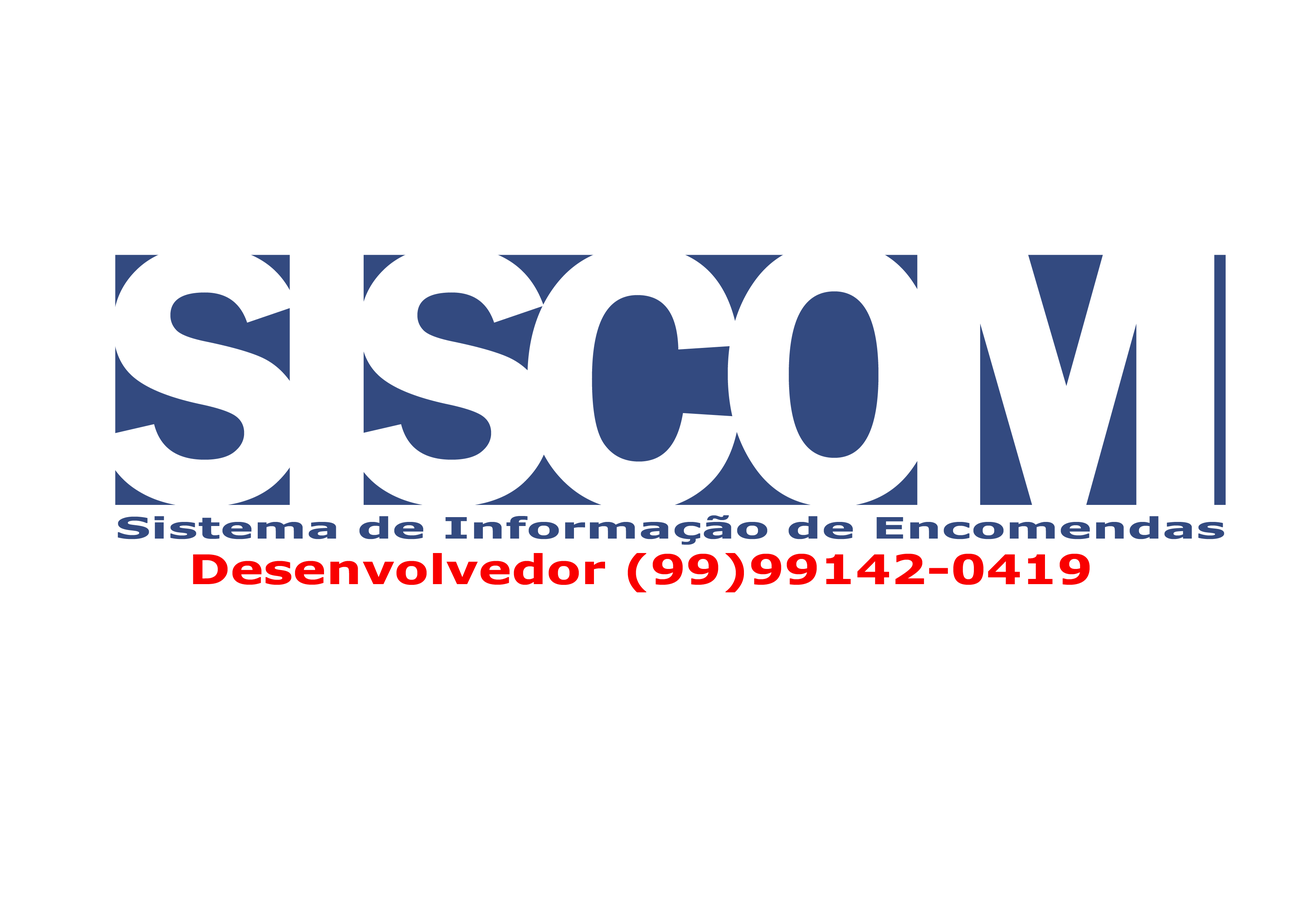
<style>
.page{position:relative;width:1299px;height:918px;background:#ffffff}
.page>*{position:absolute;margin:0}
.t1{font:379.6px "FranklinGothic-Demi";color:#ffffff}
.t2{font:385.4px "FranklinGothic-Demi";color:#ffffff;scale:0.97 1}
.t3{font:379.6px "Bauhaus93";color:#ffffff}
.t4{font:384.5px "FranklinGothic-Heavy";color:#ffffff;scale:1.07 1}
.t5{font:29.5px "Verdana-Bold";color:#334a80;scale:1.69 1}
.t6{font:41px "Verdana-Bold";color:#f90000;scale:1.22 1}
</style>
<div class="page">
<p class="t1" style="left:100px;top:246px;width:203px;height:261px">S</p>
<p class="t1" style="left:347px;top:246px;width:203px;height:261px">S</p>
<p class="t2" style="left:527px;top:246px;width:212px;height:265px">C</p>
<p class="t2" style="left:727px;top:242px;width:212px;height:265px">O</p>
<p class="t3" style="left:290px;top:254px;width:74px;height:253px">I</p>
<p class="t4" style="left:917px;top:250px;width:297px;height:256px">M</p>
<p class="t5" style="left:118px;top:515px;width:1106px;height:30px">Sistema de Informação de Encomendas</p>
<p class="t6" style="left:193px;top:553px;width:897px;height:40px">Desenvolvedor (99)99142-0419</p>
</div>
